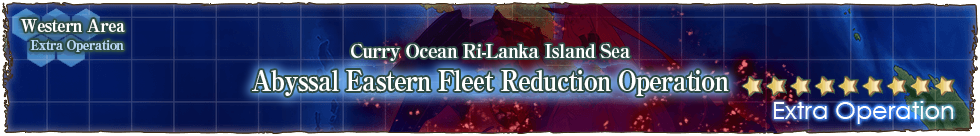
<style>
.page{position:relative;width:980px;height:136px}
.page>*{position:absolute;margin:0}
.t1{font:13px/22px "RyuminPro-ExBold";letter-spacing:-0.04em;color:#b9d7f5}
.t2{font:17px/22px "RyuminPro-ExBold";letter-spacing:-0.04em;color:#ffffff}
.t3{font:19px "RyuminPro-ExBold";letter-spacing:-0.04em;color:#ffffff}
.t4{font:28px "RyuminPro-ExBold";letter-spacing:-0.04em;color:#ffffff;scale:0.9 1}
</style>
<div class="page">
<p class="t1" style="left:20px;top:19px;width:105px;height:33px"><span class="t2">Western Area<br>　  </span>Extra Operation</p>
<p class="t3" style="left:351px;top:43px;width:280px;height:18px">Curry Ocean Ri-Lanka Island Sea</p>
<p class="t4" style="left:252px;top:70px;width:477px;height:26px">Abyssal Eastern Fleet Reduction Operation</p>
</div>
